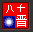
<style>
.page{position:relative;width:33px;height:32px;background:#f20000}
.page>*{position:absolute;margin:0}
.t1{font:10.4px "SimSun";color:#ffffff}
.t2{font:11.7px "SimSun";color:#ffffff}
</style>
<div class="page">
<p class="t1" style="left:6px;top:4px;width:19px;height:9px">八十</p>
<p class="t2" style="left:16px;top:15px;width:11px;height:12px">晋</p>
</div>
